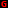
<style>
.page{position:relative;width:8px;height:8px;background:#000000}
.page>*{position:absolute;margin:0}
.t1{font:10px "Consolas-Bold";color:#fe0000}
</style>
<div class="page">
<p class="t1" style="left:1px;top:1px;width:6px;height:6px">G</p>
</div>
